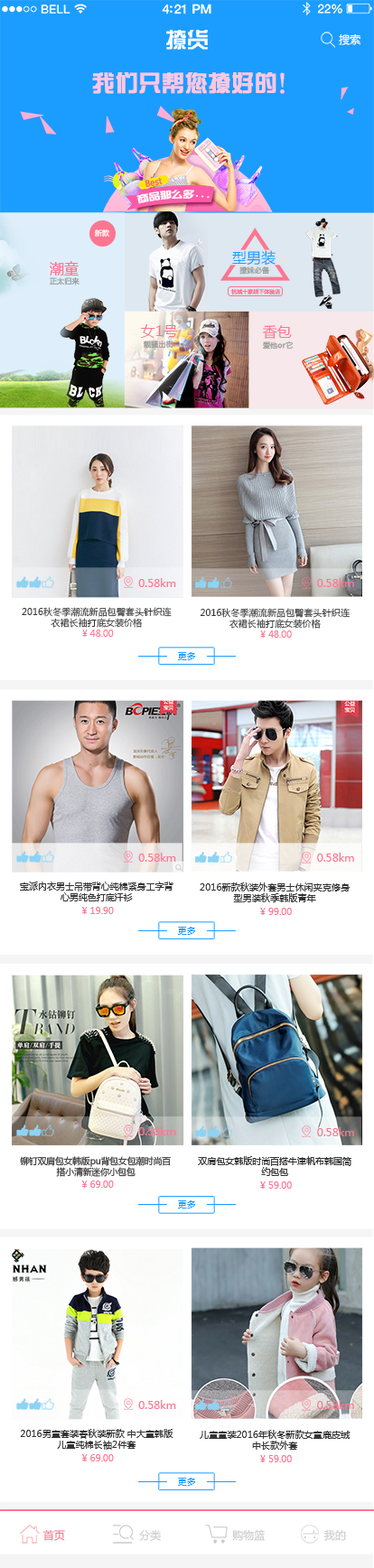
<style>
.page{position:relative;width:374px;height:1568px;background:#ffffff}
.page>*{position:absolute;margin:0}
.t1{font:21.7px "ç»å¸ç»¼èºä½ç®-regular";color:#ffffff}
.t2{font:10.8px "MicrosoftYaHei";color:#ffffff}
.t3{font:22.6px "ç»å¸ç»¼èºä½ç®-regular";color:#fdc7e0;font-weight:bold}
.t4{font:8.8px "MicrosoftYaHei";color:#f65c7b;font-weight:bold;scale:0.9 1}
.t5{font:9px "SingYiEG-Ultra-GB";color:#ffffff;scale:1.13 1}
.t6{font:7.2px "MicrosoftYaHei";color:#ffffff}
.t7{font:14.5px "MicrosoftYaHei";color:#1b9dff}
.t8{font:14.5px "MicrosoftYaHei";color:#fc7691}
.t9{font:7.2px "MicrosoftYaHei";color:#999999;font-weight:bold}
.t10{font:5.4px "MicrosoftYaHei";color:#fc7691}
.t11{font:10.8px "MicrosoftYaHei";color:#fc7691}
.t12{font:9px "MicrosoftYaHei";color:#333333}
.t13{font:9px "MicrosoftYaHei";color:#fc7691}
.t14{font:9px "MicrosoftYaHei";color:#999999}
.t15{font:9px "MicrosoftYaHei";color:#1b9dff}
.t16{font:10.8px "MicrosoftYaHei";color:#cccccc}
</style>
<div class="page">
<p class="t1" style="left:166px;top:30px;width:42px;height:20px">撩货</p>
<p class="t2" style="left:339px;top:33px;width:22px;height:12px">搜索</p>
<p class="t3" style="left:92px;top:72px;width:193px;height:22px">我们只帮您撩好的！</p>
<p class="t4" style="left:145px;top:177px;width:18px;height:11px;rotate:-11deg">Best</p>
<p class="t5" style="left:136px;top:190px;width:74px;height:14px;rotate:-3deg">商品那么多...</p>
<p class="t6" style="left:94px;top:229px;width:15px;height:8px">新款</p>
<p class="t7" style="left:232px;top:250px;width:43px;height:16px">型男装</p>
<p class="t8" style="left:50px;top:261px;width:29px;height:14px">潮童</p>
<p class="t9" style="left:239px;top:266px;width:31px;height:9px">撩妹必备</p>
<p class="t9" style="left:49px;top:277px;width:30px;height:8px">正太归来</p>
<p class="t10" style="left:231px;top:288px;width:50px;height:7px">杭城十家线下体验店</p>
<p class="t8" style="left:141px;top:324px;width:37px;height:14px">女1号</p>
<p class="t8" style="left:262px;top:325px;width:30px;height:14px">香包</p>
<p class="t9" style="left:143px;top:341px;width:30px;height:8px">靓骚出街</p>
<p class="t9" style="left:262px;top:341px;width:31px;height:9px">爱他or它</p>
<p class="t11" style="left:138px;top:578px;width:38px;height:9px">0.58km</p>
<p class="t11" style="left:317px;top:578px;width:37px;height:9px">0.58km</p>
<p class="t12" style="left:22px;top:607px;width:150px;height:30px;text-align:center">2016秋冬季潮流新品包臀套头针织连衣裙长袖打底女装价格                <br><span class="t13"> ¥ 48.00</span></p>
<p class="t12" style="left:200px;top:608px;width:150px;height:30px;text-align:center">2016秋冬季潮流新品包臀套头针织连衣裙长袖打底女装价格<span class="t14">                <br></span><span class="t13"> ¥ 48.00</span></p>
<p class="t15" style="left:178px;top:652px;width:18px;height:8px">更多</p>
<p class="t11" style="left:138px;top:853px;width:38px;height:9px">0.58km</p>
<p class="t11" style="left:317px;top:853px;width:37px;height:9px">0.58km</p>
<p class="t12" style="left:20px;top:882px;width:153px;height:32px;text-align:center">宝派内衣男士吊带背心纯棉紧身工字背心男纯色打底汗衫                <br><span class="t13"> ¥ 19.90</span></p>
<p class="t12" style="left:200px;top:882px;width:150px;height:33px;text-align:center">2016新款秋装外套男士休闲夹克修身型男装秋季韩版青年<span class="t14">                <br></span><span class="t13"> ¥ 99.00</span></p>
<p class="t15" style="left:178px;top:927px;width:18px;height:8px">更多</p>
<p class="t11" style="left:138px;top:1126px;width:38px;height:9px">0.58km</p>
<p class="t11" style="left:317px;top:1127px;width:37px;height:9px">0.58km</p>
<p class="t12" style="left:20px;top:1156px;width:151px;height:32px;text-align:center">铆钉双肩包女韩版pu背包女包潮时尚百搭小清新迷你小包包                <br><span class="t13"> ¥ 69.00</span></p>
<p class="t12" style="left:198px;top:1156px;width:153px;height:33px;text-align:center">双肩包女韩版时尚百搭牛津帆布韩国简约包包<span class="t14">               <br></span><span class="t13"> ¥ 59.00</span></p>
<p class="t15" style="left:178px;top:1200px;width:18px;height:9px">更多</p>
<p class="t11" style="left:138px;top:1400px;width:38px;height:9px">0.58km</p>
<p class="t11" style="left:317px;top:1400px;width:37px;height:9px">0.58km</p>
<p class="t12" style="left:20px;top:1429px;width:153px;height:32px;text-align:center">2016男童套装春秋装新款 中大童韩版儿童纯棉长袖2件套                <br><span class="t13"> ¥ 69.00</span></p>
<p class="t12" style="left:200px;top:1430px;width:150px;height:32px;text-align:center">儿童童装2016年秋冬新款女童鹿皮绒中长款外套<span class="t14">               <br></span><span class="t13"> ¥ 59.00</span></p>
<p class="t15" style="left:178px;top:1478px;width:18px;height:8px">更多</p>
<p class="t16" style="left:42px;top:1529px;width:304px;height:12px"><span class="t11">首页                       </span> 分类                       购物篮                   我的</p>
</div>
